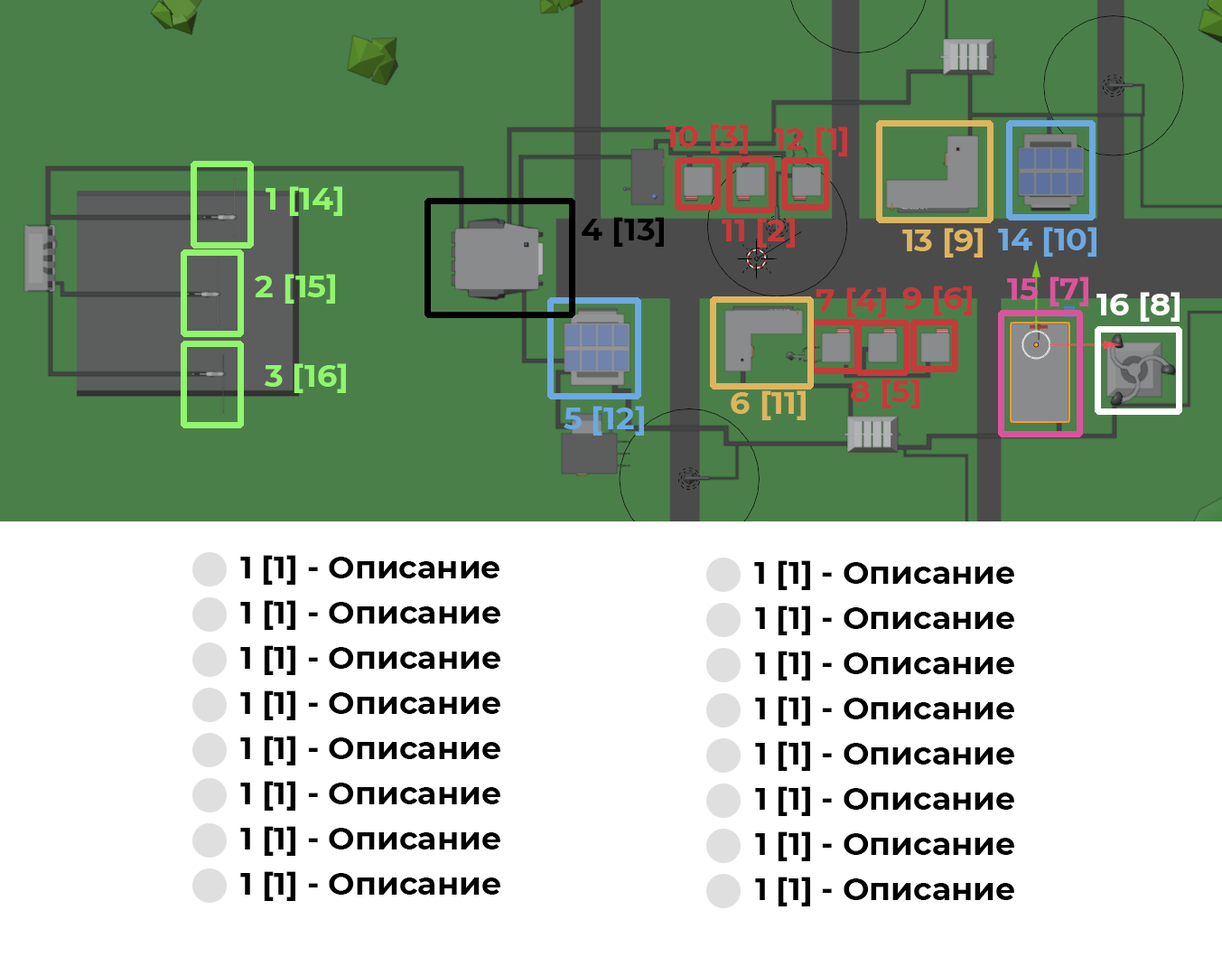
<style>
.page{position:relative;width:1222px;height:976px;background:#ffffff}
.page>*{position:absolute;margin:0}
.t1{font:31.6px "Montserrat-Bold";color:#c53a3a}
.t2{font:31.6px "Montserrat-Bold";color:#90f66c}
.t3{font:31.6px "Montserrat-Bold";color:#000000}
.t4{font:31.6px "Montserrat-Bold";color:#deb55e}
.t5{font:31.6px "Montserrat-Bold";color:#6ba9e2}
.t6{font:31.6px "Montserrat-Bold";color:#db539d}
.t7{font:31.6px "Montserrat-Bold";color:#ffffff}
.t8{font:31.6px "Montserrat-Bold";color:#010101}
</style>
<div class="page">
<p class="t1" style="left:666px;top:124px;width:82px;height:30px">10 [3]</p>
<p class="t1" style="left:774px;top:126px;width:73px;height:30px">12 [1]</p>
<p class="t2" style="left:266px;top:186px;width:76px;height:30px">1 [14]</p>
<p class="t3" style="left:582px;top:217px;width:82px;height:30px">4 [13]</p>
<p class="t1" style="left:722px;top:218px;width:73px;height:30px">11 [2]</p>
<p class="t4" style="left:902px;top:228px;width:81px;height:29px">13 [9]</p>
<p class="t5" style="left:998px;top:227px;width:99px;height:30px">14 [10]</p>
<p class="t2" style="left:255px;top:274px;width:80px;height:30px">2 [15]</p>
<p class="t6" style="left:1007px;top:276px;width:82px;height:30px">15 [7]</p>
<p class="t1" style="left:816px;top:287px;width:70px;height:30px">7 [4]</p>
<p class="t1" style="left:902px;top:285px;width:70px;height:30px">9 [6]</p>
<p class="t7" style="left:1097px;top:292px;width:83px;height:30px">16 [8]</p>
<p class="t2" style="left:265px;top:363px;width:81px;height:30px">3 [16]</p>
<p class="t1" style="left:851px;top:379px;width:69px;height:29px">8 [5]</p>
<p class="t4" style="left:731px;top:390px;width:75px;height:30px">6 [11]</p>
<p class="t5" style="left:564px;top:406px;width:80px;height:29px">5 [12]</p>
<p class="t8" style="left:240px;top:555px;width:260px;height:29px">1 [1] - Описание</p>
<p class="t8" style="left:754px;top:560px;width:260px;height:30px">1 [1] - Описание</p>
<p class="t8" style="left:240px;top:600px;width:260px;height:30px">1 [1] - Описание</p>
<p class="t8" style="left:755px;top:605px;width:259px;height:30px">1 [1] - Описание</p>
<p class="t8" style="left:240px;top:645px;width:260px;height:30px">1 [1] - Описание</p>
<p class="t8" style="left:755px;top:650px;width:259px;height:30px">1 [1] - Описание</p>
<p class="t8" style="left:240px;top:690px;width:260px;height:30px">1 [1] - Описание</p>
<p class="t8" style="left:755px;top:696px;width:259px;height:29px">1 [1] - Описание</p>
<p class="t8" style="left:240px;top:735px;width:260px;height:30px">1 [1] - Описание</p>
<p class="t8" style="left:755px;top:741px;width:259px;height:30px">1 [1] - Описание</p>
<p class="t8" style="left:240px;top:780px;width:260px;height:30px">1 [1] - Описание</p>
<p class="t8" style="left:755px;top:786px;width:259px;height:30px">1 [1] - Описание</p>
<p class="t8" style="left:240px;top:826px;width:260px;height:29px">1 [1] - Описание</p>
<p class="t8" style="left:755px;top:831px;width:259px;height:30px">1 [1] - Описание</p>
<p class="t8" style="left:240px;top:871px;width:260px;height:30px">1 [1] - Описание</p>
<p class="t8" style="left:755px;top:876px;width:259px;height:30px">1 [1] - Описание</p>
</div>
